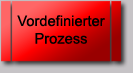
<style>
.page{position:relative;width:133px;height:73px}
.page>*{position:absolute;margin:0}
.t1{font:14.7px "ArialMT";color:#000000}
</style>
<div class="page">
<p class="t1" style="left:17px;top:15px;width:88px;height:29px;text-align:center">Vordefinierter <br>Prozess</p>
</div>
